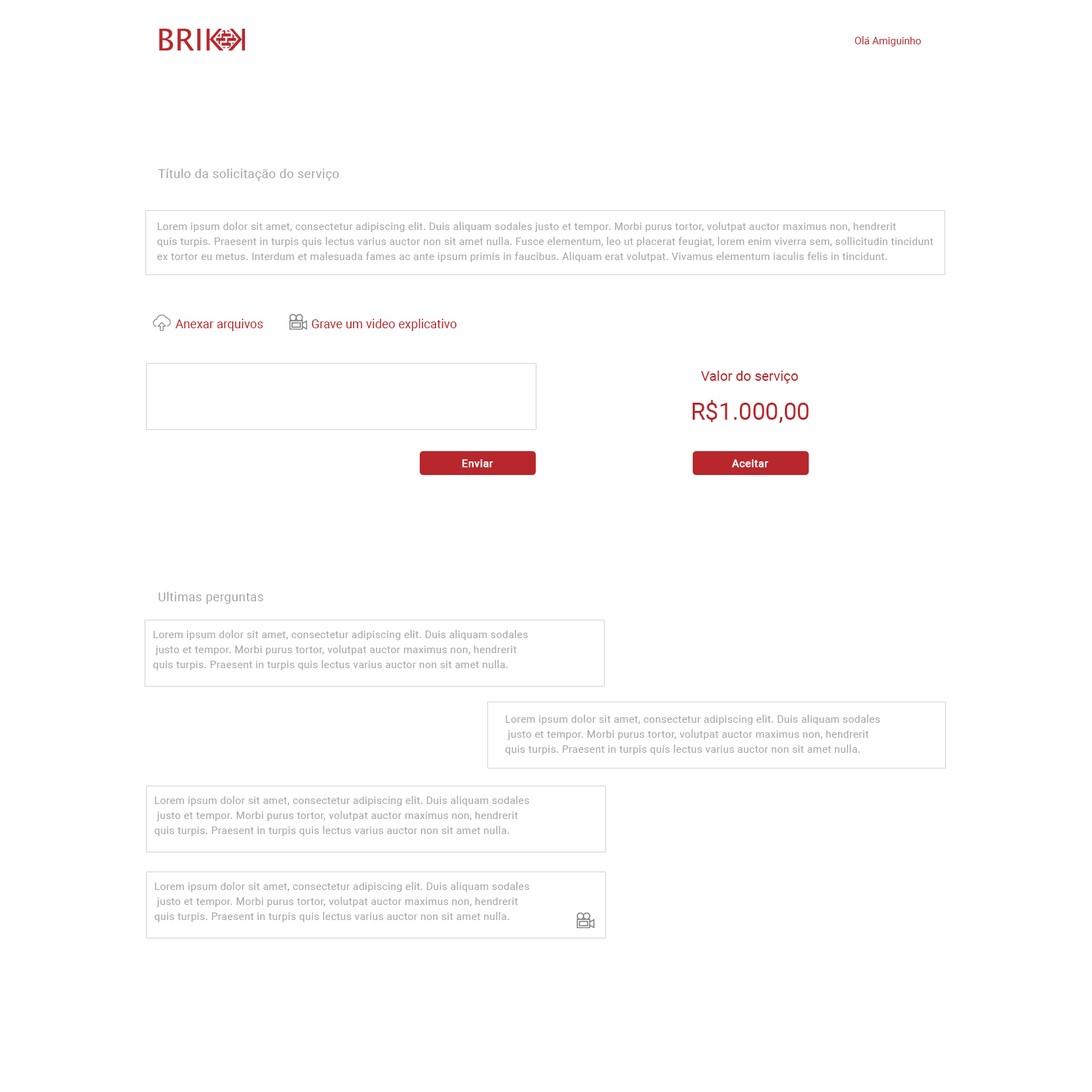
<style>
.page{position:relative;width:1092px;height:1092px;background:#ffffff}
.page>*{position:absolute;margin:0}
.t1{font:10.2px "Roboto-Regular";color:#b8272c}
.t2{font:12.3px "Roboto-Regular";letter-spacing:0.03em;color:#a4a4a4}
.t3{font:10.2px/15px "Roboto-Regular";letter-spacing:0.03em;color:#a4a4a4}
.t4{font:12.3px "Roboto-Regular";color:#b8272c}
.t5{font:13.6px "Roboto-Regular";color:#b8272c}
.t6{font:23.9px "Roboto-Regular";color:#b8272c}
.t7{font:10.2px "Roboto-Regular";letter-spacing:0.03em;color:#ffffff;font-weight:bold}
</style>
<div class="page">
<p class="t1" style="left:854px;top:36px;width:67px;height:10px">Olá Amiguinho</p>
<p class="t2" style="left:158px;top:169px;width:181px;height:12px">Título da solicitação do serviço</p>
<p class="t3" style="left:157px;top:222px;width:776px;height:40px">Lorem ipsum dolor sit amet, consectetur adipiscing elit. Duis aliquam sodales justo et tempor. Morbi purus tortor, volutpat auctor maximus non, hendrerit <br>quis turpis. Praesent in turpis quis lectus varius auctor non sit amet nulla. Fusce elementum, leo ut placerat feugiat, lorem enim viverra sem, sollicitudin tincidunt <br>ex tortor eu metus. Interdum et malesuada fames ac ante ipsum primis in faucibus. Aliquam erat volutpat. Vivamus elementum iaculis felis in tincidunt.</p>
<p class="t4" style="left:175px;top:319px;width:88px;height:12px">Anexar arquivos</p>
<p class="t4" style="left:312px;top:319px;width:145px;height:12px">Grave um video explicativo</p>
<p class="t5" style="left:701px;top:371px;width:98px;height:13px">Valor do serviço</p>
<p class="t6" style="left:692px;top:400px;width:117px;height:23px">R$1.000,00</p>
<p class="t7" style="left:462px;top:459px;width:31px;height:9px">Enviar</p>
<p class="t7" style="left:732px;top:459px;width:36px;height:9px">Aceitar</p>
<p class="t2" style="left:158px;top:592px;width:105px;height:12px">Ultimas perguntas</p>
<p class="t3" style="left:153px;top:630px;width:375px;height:40px">Lorem ipsum dolor sit amet, consectetur adipiscing elit. Duis aliquam sodales<br> justo et tempor. Morbi purus tortor, volutpat auctor maximus non, hendrerit <br>quis turpis. Praesent in turpis quis lectus varius auctor non sit amet nulla.</p>
<p class="t3" style="left:153px;top:630px;width:375px;height:40px">Lorem ipsum dolor sit amet, consectetur adipiscing elit. Duis aliquam sodales<br> justo et tempor. Morbi purus tortor, volutpat auctor maximus non, hendrerit <br>quis turpis. Praesent in turpis quis lectus varius auctor non sit amet nulla.</p>
<p class="t3" style="left:505px;top:715px;width:375px;height:40px">Lorem ipsum dolor sit amet, consectetur adipiscing elit. Duis aliquam sodales<br> justo et tempor. Morbi purus tortor, volutpat auctor maximus non, hendrerit <br>quis turpis. Praesent in turpis quis lectus varius auctor non sit amet nulla.</p>
<p class="t3" style="left:154px;top:796px;width:376px;height:40px">Lorem ipsum dolor sit amet, consectetur adipiscing elit. Duis aliquam sodales<br> justo et tempor. Morbi purus tortor, volutpat auctor maximus non, hendrerit <br>quis turpis. Praesent in turpis quis lectus varius auctor non sit amet nulla.</p>
<p class="t3" style="left:154px;top:882px;width:376px;height:40px">Lorem ipsum dolor sit amet, consectetur adipiscing elit. Duis aliquam sodales<br> justo et tempor. Morbi purus tortor, volutpat auctor maximus non, hendrerit <br>quis turpis. Praesent in turpis quis lectus varius auctor non sit amet nulla.</p>
</div>
